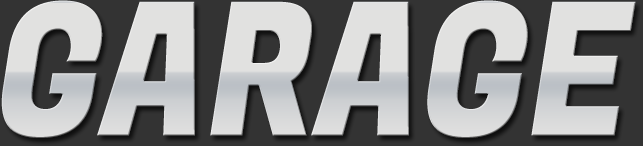
<style>
.page{position:relative;width:643px;height:146px;background:#333333}
.page>*{position:absolute;margin:0}
.t1{font:185.2px "FugazOne-Regular";color:#dfdfdf;scale:0.89 1}
</style>
<div class="page">
<p class="t1" style="left:1px;top:0px;width:635px;height:138px">GARAGE</p>
</div>
